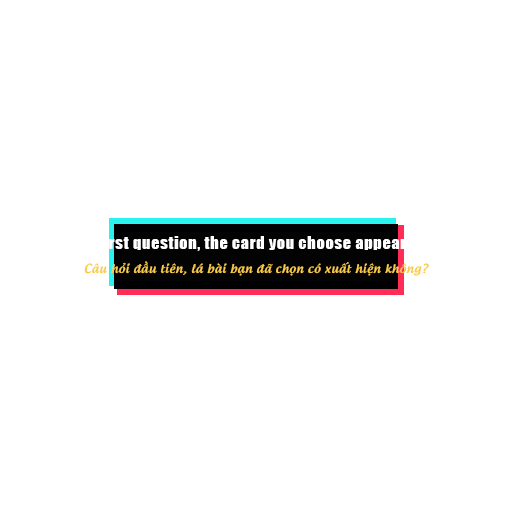
<style>
.page{position:relative;width:512px;height:512px;background:#ffffff}
.page>*{position:absolute;margin:0}
.t1{font:12px/24px "UTM-Androgyne";letter-spacing:0.05em;color:#faca49}
.t2{font:16px/24px "Impact";letter-spacing:0.05em;color:#ffffff}
</style>
<div class="page">
<p class="t1" style="left:84px;top:236px;width:345px;height:40px;text-align:justify"><span class="t2">First question, the card you choose appear?<br></span>Câu hỏi đầu tiên, lá bài bạn đã chọn có xuất hiện không?</p>
</div>
